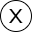
<style>
.page{position:relative;width:32px;height:32px;background:#ffffff}
.page>*{position:absolute;margin:0}
.t1{font:26.6px "Gotham-Book";letter-spacing:0.1em;color:#000000}
</style>
<div class="page">
<p class="t1" style="left:9px;top:9px;width:14px;height:14px">x</p>
</div>
